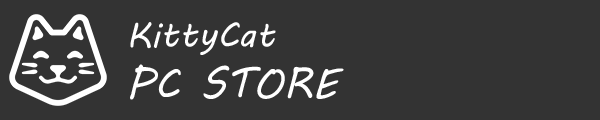
<style>
.page{position:relative;width:600px;height:120px;background:#333333}
.page>*{position:absolute;margin:0}
.t1{font:36px "MVBoli";color:#ffffff}
.t2{font:42.2px "MVBoli";color:#ffffff}
</style>
<div class="page">
<p class="t1" style="left:130px;top:22px;width:214px;height:78px">KittyCat<span class="t2"> <br>PC STORE</span></p>
</div>
